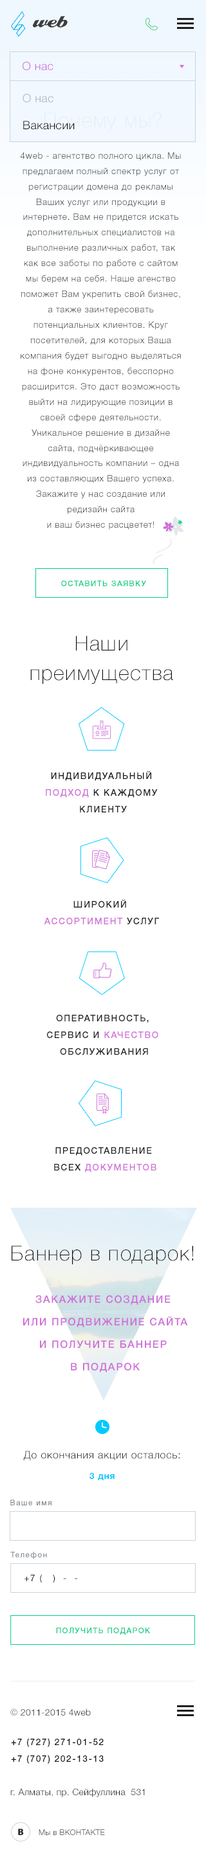
<style>
.page{position:relative;width:206px;height:1864px;background:#ffffff}
.page>*{position:absolute;margin:0}
.t1{font:11.6px "Helvetica-4-Light";letter-spacing:0.025em;color:#ce70d7}
.t2{font:11.6px/27px "Helvetica-4-Light";letter-spacing:0.025em;color:#0d0d0d}
.t3{font:11.6px/27px "Helvetica-4-Light";letter-spacing:0.025em;color:#abb6c1}
.t4{font:8.8px/15.4px "Helvetica-4-Light";letter-spacing:0.05em;color:#212121}
.t5{font:7.7px "Helvetica-6-Medium";letter-spacing:0.1em;color:#00ce7f;text-transform:uppercase}
.t6{font:20.6px/30.1px "Helvetica-3-Thin";letter-spacing:0.05em;color:#0d0d0d}
.t7{font:9px/16.7px "Helvetica-6-Medium";letter-spacing:0.1em;color:#212121;text-transform:uppercase}
.t8{font:9px/16.7px "Helvetica-6-Medium";letter-spacing:0.1em;color:#181818;text-transform:uppercase}
.t9{font:9px/16.7px "Helvetica-6-Medium";letter-spacing:0.1em;color:#ce70d7;text-transform:uppercase}
.t10{font:20.6px "Helvetica-3-Thin";letter-spacing:0.05em;color:#0d0d0d}
.t11{font:10.3px/22.5px "Helvetica-6-Medium";letter-spacing:0.1em;color:#ce70d7;text-transform:uppercase}
.t12{font:10.3px "Helvetica-4-Light";letter-spacing:0.05em;color:#212121}
.t13{font:9px "Helvetica-7-Bold";letter-spacing:0.05em;color:#00caff}
.t14{font:7.7px "Helvetica-6-Medium";letter-spacing:0.1em;color:#838c94}
.t15{font:9px "Helvetica-5-Normal";letter-spacing:0.1em;color:#1e1e1e}
.t16{font:9px "Helvetica-4-Light";letter-spacing:0.025em;color:#181818}
.t17{font:7.7px "Helvetica-4-Light";letter-spacing:0.025em}
</style>
<div class="page">
<p class="t1" style="left:22px;top:62px;width:31px;height:9px">О нас</p>
<p class="t2" style="left:22px;top:94px;width:53px;height:36px"><span class="t3">О нас <br></span>Вакансии</p>
<p class="t4" style="left:20px;top:152px;width:161px;height:378px;text-align:center">4web - агентство полного цикла. Мы предлагаем полный спектр услуг от регистрации домена до рекламы Ваших услуг или продукции в интернете. Вам не придется искать дополнительных специалистов на выполнение различных работ, так как все заботы по работе с сайтом мы берем на себя. Наше агенство поможет Вам укрепить свой бизнес, а также заинтересовать потенциальных клиентов. Круг посетителей, для которых Ваша компания будет выгодно выделяться на фоне конкурентов, бесспорно расширится. Это даст возможность выйти на лидирующие позиции в своей сфере деятельности. Уникальное решение в дизайне сайта, подчёркивающее индивидуальность компании – одна из составляющих Вашего успеха. Закажите у нас создание или редизайн сайта<br>и ваш бизнес расцветет!</p>
<p class="t5" style="left:61px;top:580px;width:85px;height:6px">оставить заявку</p>
<p class="t6" style="left:30px;top:636px;width:143px;height:48px;text-align:center">Наши<br>преимущества</p>
<p class="t7" style="left:46px;top:771px;width:112px;height:42px;text-align:center"><span class="t8">индивидуальный</span><span class="t9"> <br>подход</span> к каждому <br>клиенту</p>
<p class="t9" style="left:44px;top:899px;width:115px;height:25px;text-align:center"><span class="t7">Широкий <br></span>ассортимент<span class="t7"> услуг</span></p>
<p class="t7" style="left:47px;top:1014px;width:111px;height:41px;text-align:center">Оперативность, <br>сервис и <span class="t9">качество</span> <br>обслуживания</p>
<p class="t7" style="left:54px;top:1147px;width:102px;height:26px;text-align:center">Предоставление <br>всех <span class="t9">документов</span></p>
<p class="t10" style="left:12px;top:1246px;width:181px;height:18px">Баннер в подарок!</p>
<p class="t11" style="left:23px;top:1295px;width:165px;height:77px;text-align:center">закажите создание <br>или продвижение сайта<br>и получите баннер <br>в подарок</p>
<p class="t12" style="left:23px;top:1451px;width:156px;height:10px">До окончания акции осталось:</p>
<p class="t13" style="left:89px;top:1473px;width:25px;height:7px">3 дня</p>
<p class="t14" style="left:10px;top:1500px;width:41px;height:6px">Ваше имя</p>
<p class="t14" style="left:10px;top:1552px;width:37px;height:8px">Телефон</p>
<p class="t15" style="left:24px;top:1574px;width:54px;height:9px">+7 (   )  -  -</p>
<p class="t5" style="left:56px;top:1628px;width:94px;height:7px">получить подарок</p>
<p class="t16" style="left:10px;top:1709px;width:81px;height:7px">© 2011-2015 4web</p>
<p class="t8" style="left:11px;top:1738px;width:93px;height:26px">+7 (727) 271-01-52<br>+7 (707) 202-13-13</p>
<p class="t16" style="left:10px;top:1788px;width:135px;height:9px">г. Алматы, пр. Сейфуллина  531</p>
<p class="t17" style="left:39px;top:1830px;width:66px;height:5px">Мы в ВКОНТАКТЕ</p>
</div>
